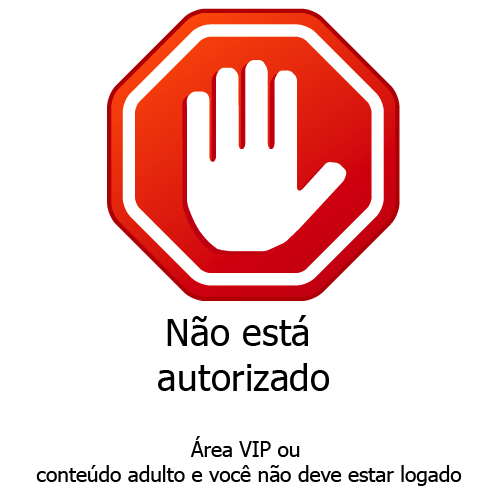
<style>
.page{position:relative;width:500px;height:500px;background:#ffffff}
.page>*{position:absolute;margin:0}
.t1{font:37.5px "Tahoma";color:#000000}
.t2{font:20.8px "Tahoma";color:#000000}
</style>
<div class="page">
<p class="t1" style="left:158px;top:315px;width:171px;height:76px;text-align:center">Não está <br>autorizado</p>
<p class="t2" style="left:36px;top:436px;width:426px;height:50px;text-align:center">Área VIP ou <br>conteúdo adulto e você não deve estar logado</p>
</div>
